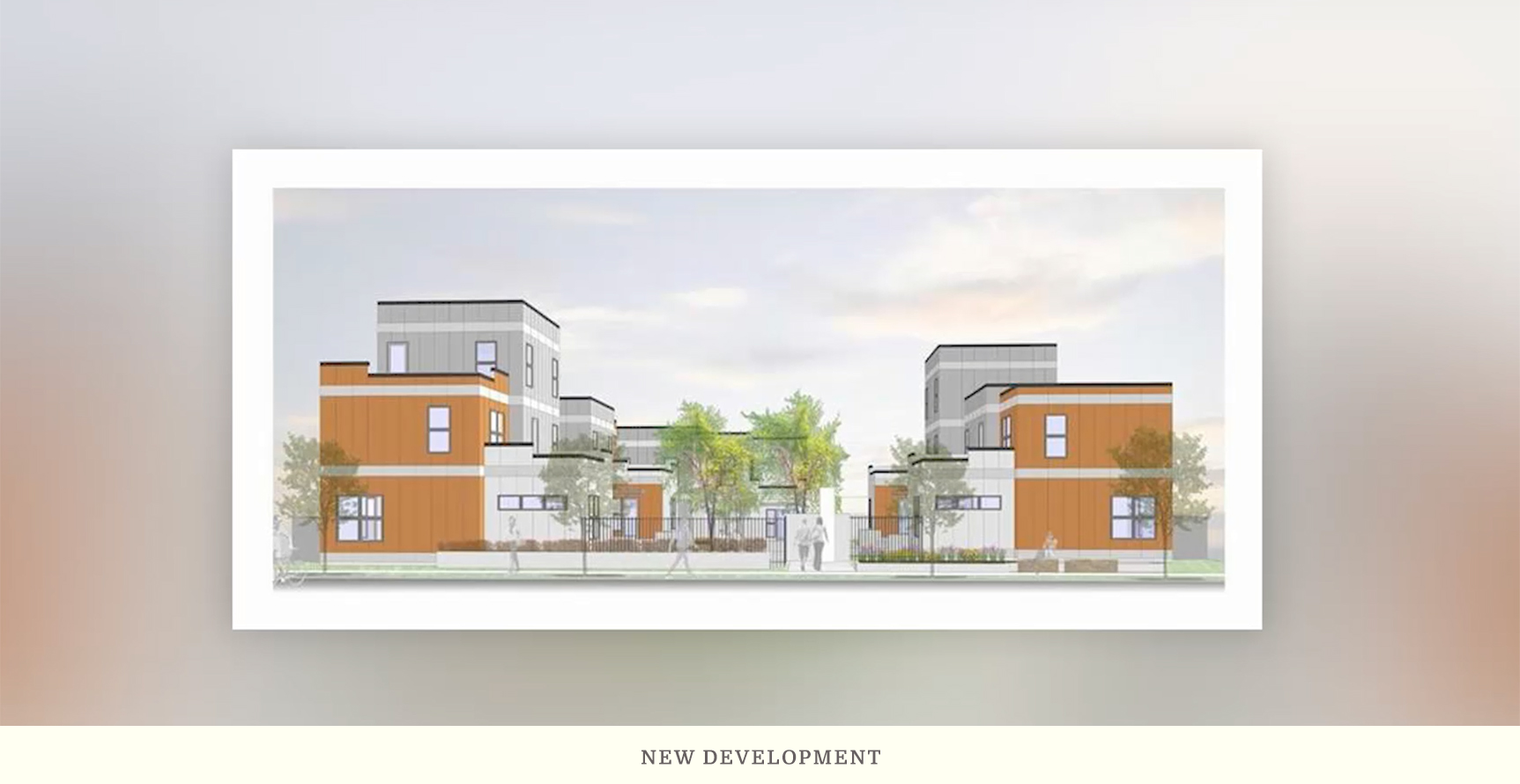
<style>
.page{position:relative;width:1520px;height:784px}
.page>*{position:absolute;margin:0}
.t1{font:19.6px "Domine-Bold";letter-spacing:0.1em;color:#676061}
</style>
<div class="page">
<p class="t1" style="left:642px;top:750px;width:238px;height:15px">NEW DEVELOPMENT</p>
</div>
